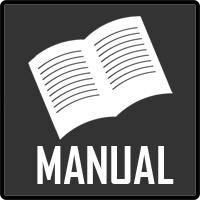
<style>
.page{position:relative;width:200px;height:200px;background:#333333}
.page>*{position:absolute;margin:0}
.t1{font:50px "AgencyFB-Bold";color:#ffffff}
</style>
<div class="page">
<p class="t1" style="left:37px;top:146px;width:137px;height:38px">MANUAL</p>
</div>
